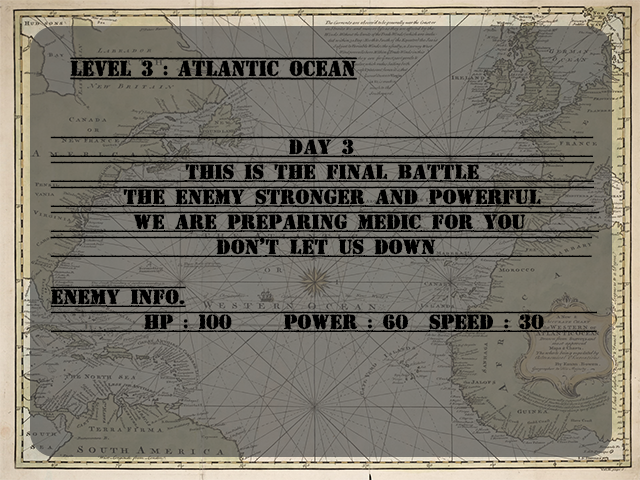
<style>
.page{position:relative;width:640px;height:480px}
.page>*{position:absolute;margin:0}
.t1{font:20.9px "TopSecret";letter-spacing:-0.02em;color:#000000;text-transform:uppercase;font-weight:bold}
</style>
<div class="page">
<p class="t1" style="left:50px;top:136px;width:550px;height:197px">day 3                       <br>             this is the final battle           <br>       the enemy stronger and powerful     <br>        we are preparing medic for you       <br>                don’t let us down               <br><br>enemy info.<br>         hp : 100     power : 60  speed : 30</p>
</div>
